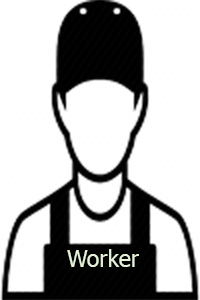
<style>
.page{position:relative;width:200px;height:300px;background:#ffffff}
.page>*{position:absolute;margin:0}
.t1{font:23.3px "Tahoma";color:#e4f1d9}
</style>
<div class="page">
<p class="t1" style="left:67px;top:249px;width:72px;height:18px">Worker</p>
</div>
